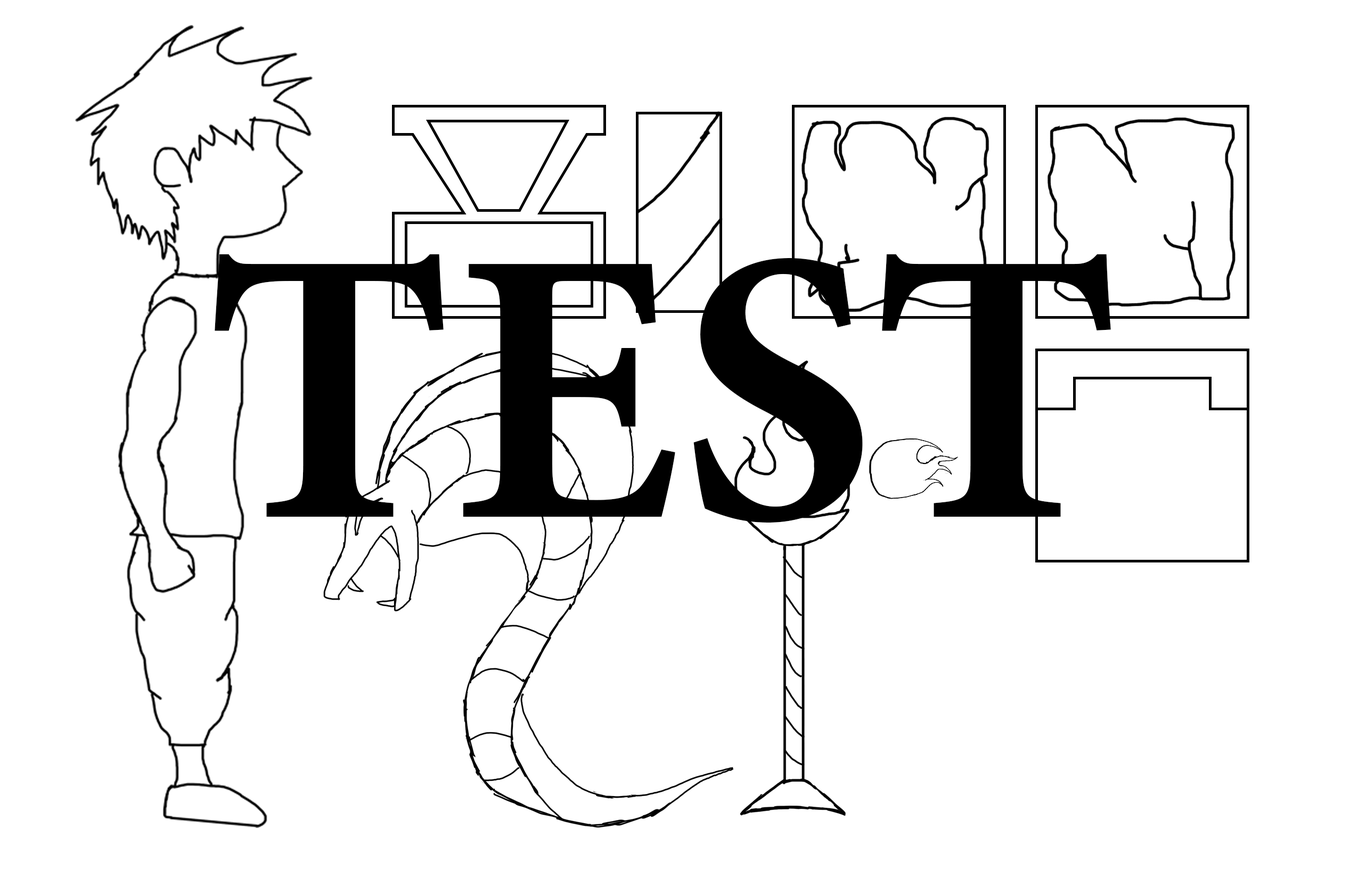
<style>
.page{position:relative;width:1358px;height:878px;background:#ffffff}
.page>*{position:absolute;margin:0}
.t1{font:388.7px "MinionPro-Bold";color:#000000}
</style>
<div class="page">
<p class="t1" style="left:215px;top:254px;width:896px;height:269px">TEST</p>
</div>
